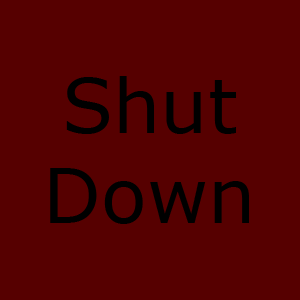
<style>
.page{position:relative;width:300px;height:300px;background:#560000}
.page>*{position:absolute;margin:0}
.t1{font:75px "Verdana";color:#000000}
</style>
<div class="page">
<p class="t1" style="left:50px;top:76px;width:199px;height:148px;text-align:center">Shut<br>Down</p>
</div>
